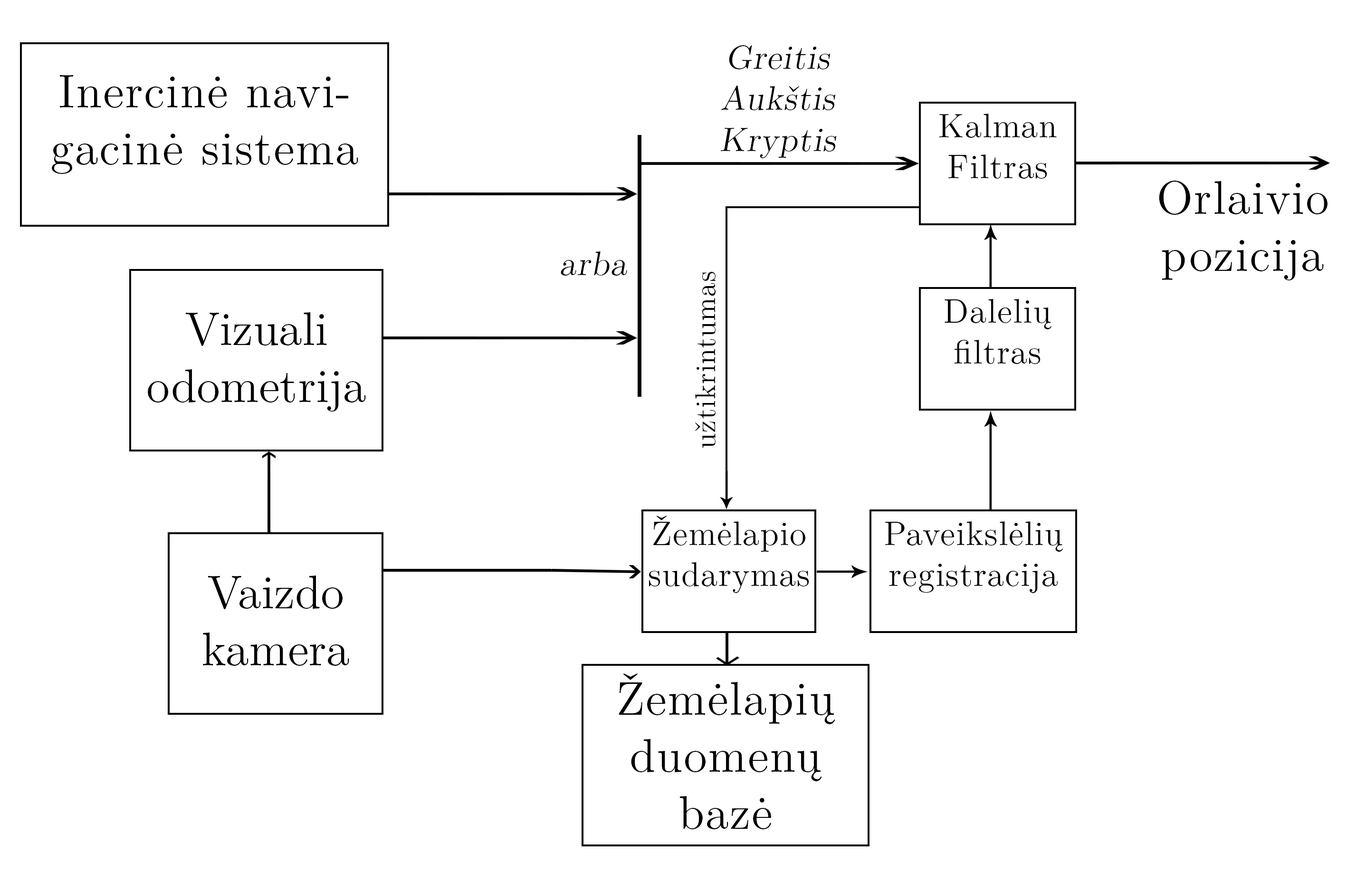
<style>
.page{position:relative;width:1366px;height:873px;background:#ffffff}
.page>*{position:absolute;margin:0}
.t1{font:34.2px "LMRoman12-Regular";letter-spacing:0.025em;color:#000000;font-style:italic}
.t2{font:47.5px "LMRoman12-Regular";letter-spacing:0.025em;color:#000000}
.t3{font:34px "LMRoman12-Regular";letter-spacing:0.025em;color:#000000}
.t4{font:28.5px "LMRoman12-Regular";letter-spacing:0.025em;color:#000000}
.t5{font:47.5px "LMRoman12-Regular";color:#000000}
</style>
<div class="page">
<p class="t1" style="left:721px;top:45px;width:115px;height:113px;text-align:center">Greitis<br>Aukštis<br>Kryptis</p>
<p class="t2" style="left:52px;top:75px;width:306px;height:99px;text-align:center">Inercinė navigacinė sistema</p>
<p class="t3" style="left:939px;top:114px;width:118px;height:65px;text-align:center">Kalman Filtras</p>
<p class="t2" style="left:1159px;top:181px;width:169px;height:99px;text-align:center">Orlaivio<br>pozicija</p>
<p class="t1" style="left:561px;top:251px;width:66px;height:25px">arba</p>
<p class="t4" style="left:695px;top:272px;width:21px;height:176px;rotate:-90deg">užtikrintumas</p>
<p class="t3" style="left:945px;top:299px;width:107px;height:65px;text-align:center">Dalelių filtras</p>
<p class="t5" style="left:148px;top:312px;width:218px;height:99px;text-align:center">Vizuali odometrija</p>
<p class="t3" style="left:649px;top:516px;width:160px;height:77px;text-align:center">Žemėlapio sudarymas</p>
<p class="t3" style="left:885px;top:521px;width:178px;height:72px;text-align:center">Paveikslėlių registracija</p>
<p class="t5" style="left:203px;top:575px;width:146px;height:91px;text-align:center">Vaizdo <br>kamera</p>
<p class="t2" style="left:619px;top:673px;width:216px;height:156px;text-align:center">Žemėlapių duomenų bazė</p>
</div>
